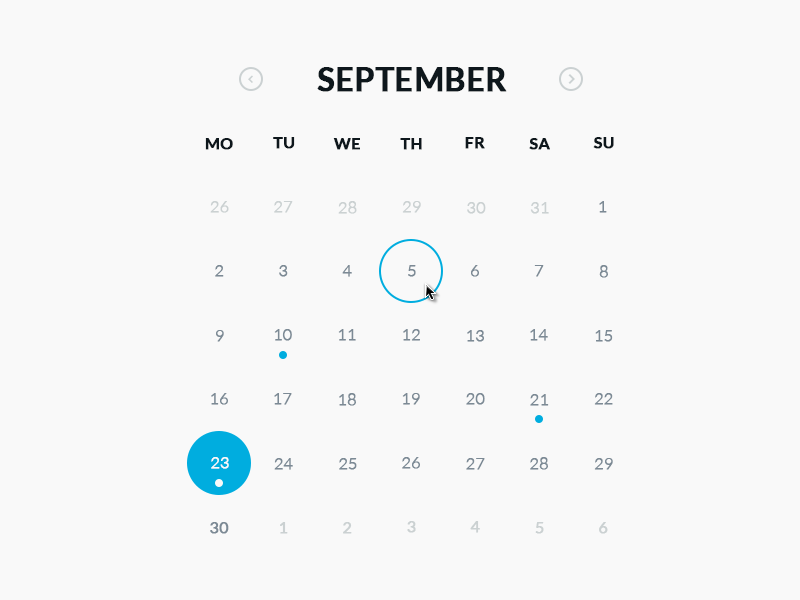
<style>
.page{position:relative;width:800px;height:600px;background:#f9f9f9}
.page>*{position:absolute;margin:0}
.t1{font:32px "Lato-Bold";color:#0e171c;text-transform:uppercase;font-weight:bold}
.t2{font:16px "Lato-Bold";color:#0e171c;text-transform:uppercase;font-weight:bold}
.t3{font:16px "Lato-Light";color:#cbd1d2;text-transform:uppercase;font-weight:bold}
.t4{font:16px "Lato-Light";color:#7c8a95;text-transform:uppercase;font-weight:bold}
.t5{font:16px "Lato-Light";color:#f9f9f9;text-transform:uppercase;font-weight:bold}
.t6{font:16px "Lato-Regular";color:#cbd1d2;text-transform:uppercase;font-weight:bold}
.t7{font:16px "Lato-Regular";color:#7c8a95;text-transform:uppercase;font-weight:bold}
</style>
<div class="page">
<p class="t1" style="left:317px;top:67px;width:190px;height:25px">September</p>
<p class="t2" style="left:273px;top:137px;width:22px;height:12px">Tu</p>
<p class="t2" style="left:465px;top:137px;width:20px;height:12px">Fr</p>
<p class="t2" style="left:593px;top:137px;width:21px;height:12px">Su</p>
<p class="t2" style="left:205px;top:138px;width:28px;height:12px">Mo</p>
<p class="t2" style="left:333px;top:138px;width:27px;height:12px">We</p>
<p class="t2" style="left:400px;top:138px;width:22px;height:12px">Th</p>
<p class="t2" style="left:529px;top:138px;width:21px;height:12px">Sa</p>
<p class="t3" style="left:210px;top:201px;width:19px;height:12px">26</p>
<p class="t3" style="left:274px;top:201px;width:19px;height:12px">27</p>
<p class="t3" style="left:338px;top:201px;width:19px;height:13px">28</p>
<p class="t3" style="left:402px;top:201px;width:19px;height:12px">29</p>
<p class="t3" style="left:467px;top:202px;width:19px;height:12px">30</p>
<p class="t3" style="left:530px;top:202px;width:19px;height:12px">31</p>
<p class="t4" style="left:599px;top:201px;width:8px;height:12px">1</p>
<p class="t4" style="left:215px;top:265px;width:9px;height:12px">2</p>
<p class="t4" style="left:279px;top:265px;width:9px;height:12px">3</p>
<p class="t4" style="left:342px;top:265px;width:10px;height:12px">4</p>
<p class="t4" style="left:408px;top:265px;width:8px;height:12px">5</p>
<p class="t4" style="left:471px;top:265px;width:8px;height:12px">6</p>
<p class="t4" style="left:534px;top:265px;width:10px;height:12px">7</p>
<p class="t4" style="left:599px;top:265px;width:9px;height:13px">8</p>
<p class="t4" style="left:274px;top:329px;width:18px;height:12px">10</p>
<p class="t4" style="left:338px;top:329px;width:18px;height:12px">11</p>
<p class="t4" style="left:403px;top:329px;width:17px;height:12px">12</p>
<p class="t4" style="left:530px;top:329px;width:18px;height:12px">14</p>
<p class="t4" style="left:216px;top:330px;width:8px;height:12px">9</p>
<p class="t4" style="left:467px;top:330px;width:17px;height:12px">13</p>
<p class="t4" style="left:595px;top:330px;width:18px;height:12px">15</p>
<p class="t4" style="left:211px;top:393px;width:17px;height:12px">16</p>
<p class="t4" style="left:274px;top:393px;width:18px;height:12px">17</p>
<p class="t4" style="left:339px;top:393px;width:17px;height:13px">18</p>
<p class="t4" style="left:402px;top:393px;width:18px;height:12px">19</p>
<p class="t4" style="left:466px;top:393px;width:19px;height:12px">20</p>
<p class="t4" style="left:530px;top:394px;width:19px;height:12px">21</p>
<p class="t4" style="left:594px;top:393px;width:19px;height:12px">22</p>
<p class="t5" style="left:211px;top:457px;width:18px;height:12px">23</p>
<p class="t4" style="left:274px;top:458px;width:19px;height:12px">24</p>
<p class="t4" style="left:339px;top:458px;width:18px;height:12px">25</p>
<p class="t4" style="left:402px;top:457px;width:18px;height:12px">26</p>
<p class="t4" style="left:466px;top:458px;width:19px;height:12px">27</p>
<p class="t4" style="left:530px;top:457px;width:18px;height:13px">28</p>
<p class="t4" style="left:594px;top:458px;width:19px;height:12px">29</p>
<p class="t6" style="left:407px;top:521px;width:9px;height:12px">3</p>
<p class="t6" style="left:470px;top:521px;width:10px;height:12px">4</p>
<p class="t7" style="left:210px;top:522px;width:19px;height:12px">30</p>
<p class="t6" style="left:280px;top:522px;width:8px;height:12px">1</p>
<p class="t6" style="left:343px;top:522px;width:9px;height:12px">2</p>
<p class="t6" style="left:535px;top:522px;width:9px;height:12px">5</p>
<p class="t6" style="left:599px;top:522px;width:9px;height:12px">6</p>
</div>
